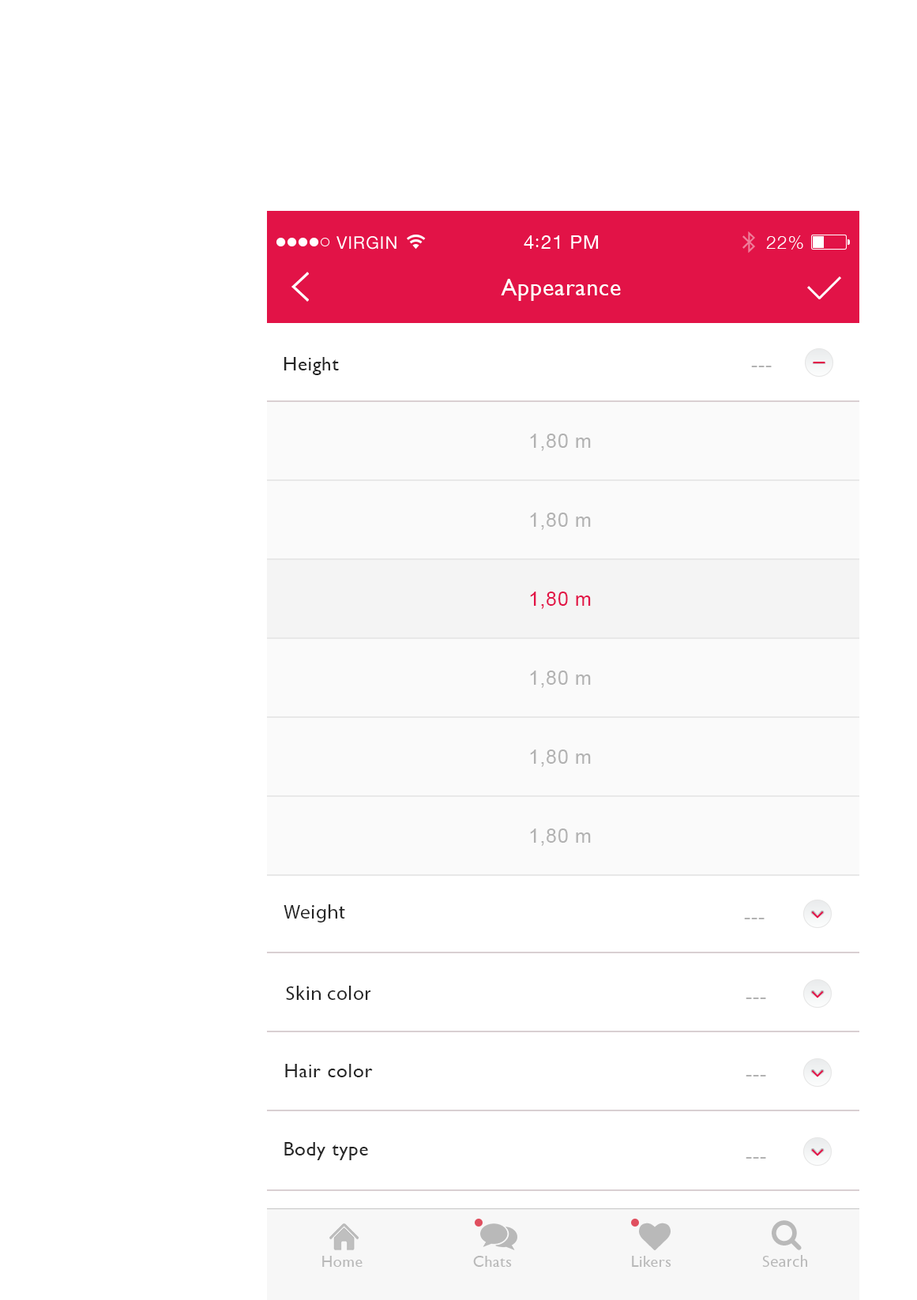
<style>
.page{position:relative;width:917px;height:1300px;background:#ffffff}
.page>*{position:absolute;margin:0}
.t1{font:23.7px "GillSans";letter-spacing:0.029em;color:#ffffff}
.t2{font:19.7px "GillSans";letter-spacing:0.029em;color:#262626}
.t3{font:19.7px "ArialMT";letter-spacing:0.029em;color:#b2b2b2}
.t4{font:19.7px "ArialMT";letter-spacing:0.029em;color:#e21347}
.t5{font:19.7px "MyriadPro-Regular";letter-spacing:0.029em;color:#262626}
.t6{font:15.8px "GillSans";letter-spacing:0.029em;color:#b9b9b9}
.t7{font:15.8px "MyriadPro-Regular";letter-spacing:0.029em;color:#b9b9b9}
</style>
<div class="page">
<p class="t1" style="left:501px;top:279px;width:120px;height:22px">Appearance</p>
<p class="t2" style="left:284px;top:357px;width:55px;height:18px">Height</p>
<p class="t3" style="left:751px;top:366px;width:21px;height:1px">---</p>
<p class="t3" style="left:530px;top:434px;width:61px;height:17px">1,80 m</p>
<p class="t3" style="left:530px;top:513px;width:61px;height:17px">1,80 m</p>
<p class="t4" style="left:530px;top:592px;width:61px;height:17px">1,80 m</p>
<p class="t3" style="left:530px;top:671px;width:61px;height:17px">1,80 m</p>
<p class="t3" style="left:530px;top:750px;width:61px;height:17px">1,80 m</p>
<p class="t3" style="left:530px;top:829px;width:61px;height:17px">1,80 m</p>
<p class="t5" style="left:284px;top:904px;width:61px;height:19px">Weight</p>
<p class="t3" style="left:744px;top:918px;width:21px;height:1px">---</p>
<p class="t5" style="left:286px;top:986px;width:84px;height:14px">Skin color</p>
<p class="t3" style="left:746px;top:998px;width:20px;height:1px">---</p>
<p class="t2" style="left:285px;top:1064px;width:88px;height:13px">Hair color</p>
<p class="t3" style="left:746px;top:1075px;width:20px;height:2px">---</p>
<p class="t2" style="left:284px;top:1142px;width:84px;height:18px">Body type</p>
<p class="t3" style="left:746px;top:1157px;width:20px;height:2px">---</p>
<p class="t6" style="left:322px;top:1256px;width:41px;height:11px">Home</p>
<p class="t6" style="left:473px;top:1256px;width:39px;height:11px">Chats</p>
<p class="t6" style="left:632px;top:1256px;width:39px;height:11px">Likers</p>
<p class="t7" style="left:762px;top:1255px;width:45px;height:12px">Search</p>
</div>
